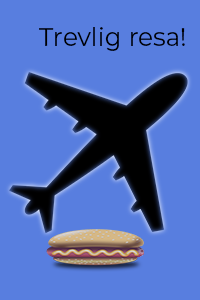
<style>
.page{position:relative;width:200px;height:300px;background:#587edf}
.page>*{position:absolute;margin:0}
.t1{font:25px "Montserrat-Regular";color:#000000}
</style>
<div class="page">
<p class="t1" style="left:39px;top:27px;width:146px;height:24px">Trevlig resa!</p>
</div>
